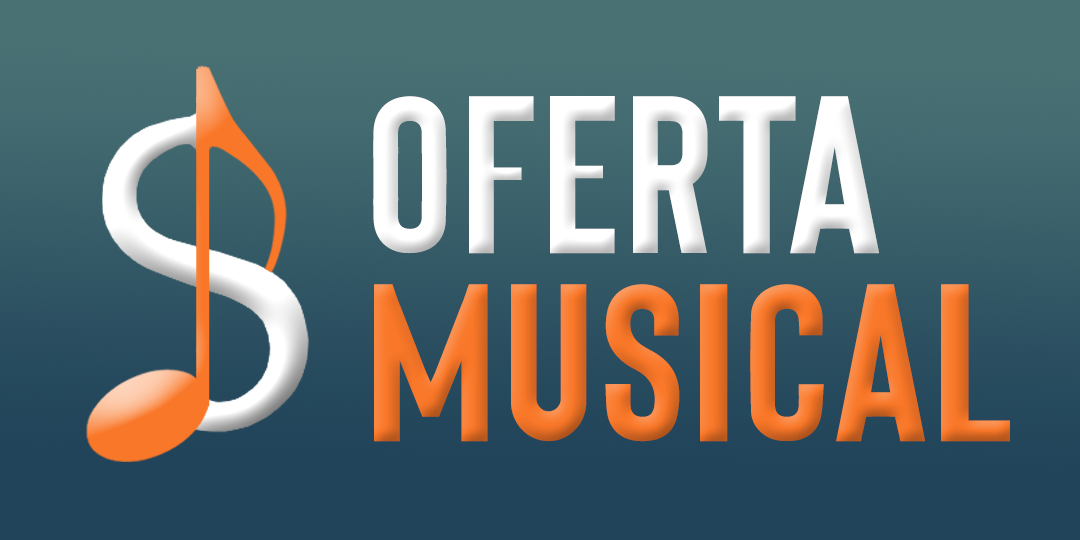
<style>
.page{position:relative;width:1080px;height:540px}
.page>*{position:absolute;margin:0}
.t1{font:323px "OriginSansRegular";letter-spacing:0.025em;color:#ffffff}
.t2{font:323px "OriginSansRegular";letter-spacing:0.025em}
</style>
<div class="page">
<p class="t1" style="left:373px;top:96px;width:506px;height:158px">OFERTA</p>
<p class="t2" style="left:374px;top:284px;width:636px;height:158px">MUSICAL</p>
</div>
